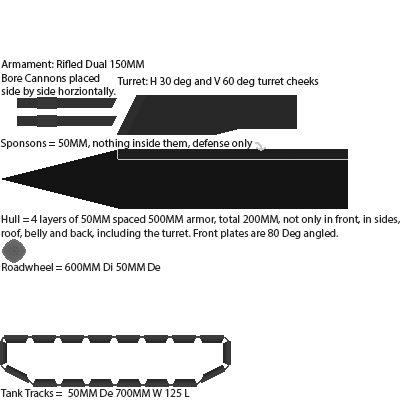
<style>
.page{position:relative;width:400px;height:400px;background:#ffffff}
.page>*{position:absolute;margin:0}
.t1{font:11.2px "MyriadPro-Regular";color:#1e1e1e}
.t2{font:11.2px "MyriadPro-Regular";color:#282828}
</style>
<div class="page">
<p class="t1" style="left:1px;top:60px;width:143px;height:38px">Armament: Rifled Dual 150MM<br>Bore Cannons placed<br>side by side horziontally.</p>
<p class="t1" style="left:117px;top:77px;width:202px;height:10px">Turret: H 30 deg and V 60 deg turret cheeks</p>
<p class="t1" style="left:0px;top:139px;width:253px;height:11px">Sponsons = 50MM, nothing inside them, defense only</p>
<p class="t2" style="left:1px;top:215px;width:399px;height:25px">Hull = 4 layers of 50MM spaced 500MM armor, total 200MM, not only in front, in sides,<br>roof, belly and back, including the turret. Front plates are 80 Deg angled.</p>
<p class="t2" style="left:2px;top:263px;width:159px;height:8px">Roadwheel = 600MM Di 50MM De</p>
<p class="t2" style="left:0px;top:389px;width:190px;height:8px">Tank Tracks =  50MM De 700MM W 125 L</p>
</div>
